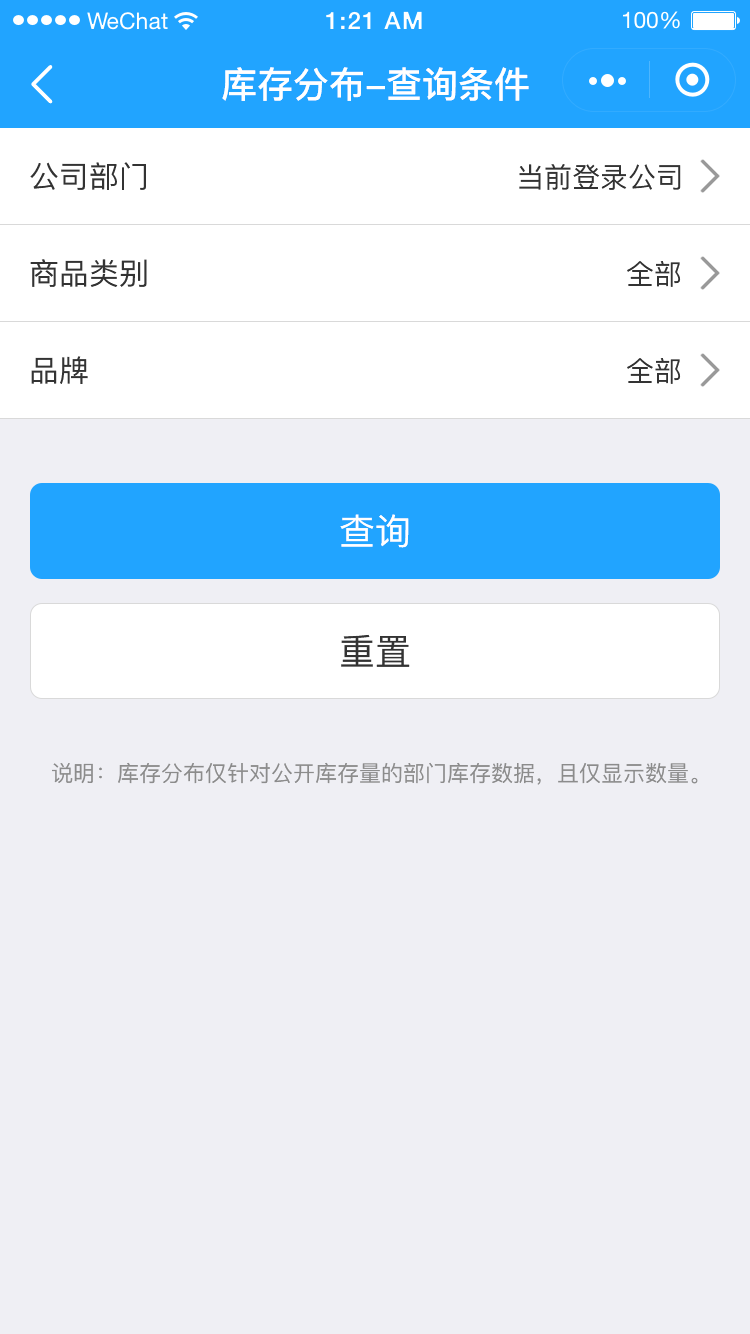
<style>
.page{position:relative;width:750px;height:1334px;background:#efeff4}
.page>*{position:absolute;margin:0}
.t1{font:36px "PingFang-SC-Bold";color:#ffffff}
.t2{font:30px "PingFang-SC-Medium";color:#333333}
.t3{font:28px "PingFang-SC-Medium";color:#333333}
.t4{font:36px "PingFang-SC-Medium";color:#ffffff}
.t5{font:36px "PingFang-SC-Medium";color:#333333}
.t6{font:22px "PingFang-SC-Medium";color:#8c8c8c}
</style>
<div class="page">
<p class="t1" style="left:222px;top:67px;width:307px;height:34px">库存分布-查询条件</p>
<p class="t2" style="left:30px;top:162px;width:116px;height:28px">公司部门</p>
<p class="t3" style="left:519px;top:164px;width:162px;height:26px">当前登录公司</p>
<p class="t2" style="left:30px;top:259px;width:117px;height:28px">商品类别</p>
<p class="t3" style="left:627px;top:261px;width:54px;height:26px">全部</p>
<p class="t2" style="left:31px;top:356px;width:57px;height:28px">品牌</p>
<p class="t3" style="left:627px;top:358px;width:54px;height:26px">全部</p>
<p class="t4" style="left:340px;top:514px;width:69px;height:34px">查询</p>
<p class="t5" style="left:341px;top:634px;width:69px;height:33px">重置</p>
<p class="t6" style="left:52px;top:762px;width:646px;height:23px">说明：库存分布仅针对公开库存量的部门库存数据，且仅显示数量。</p>
</div>
